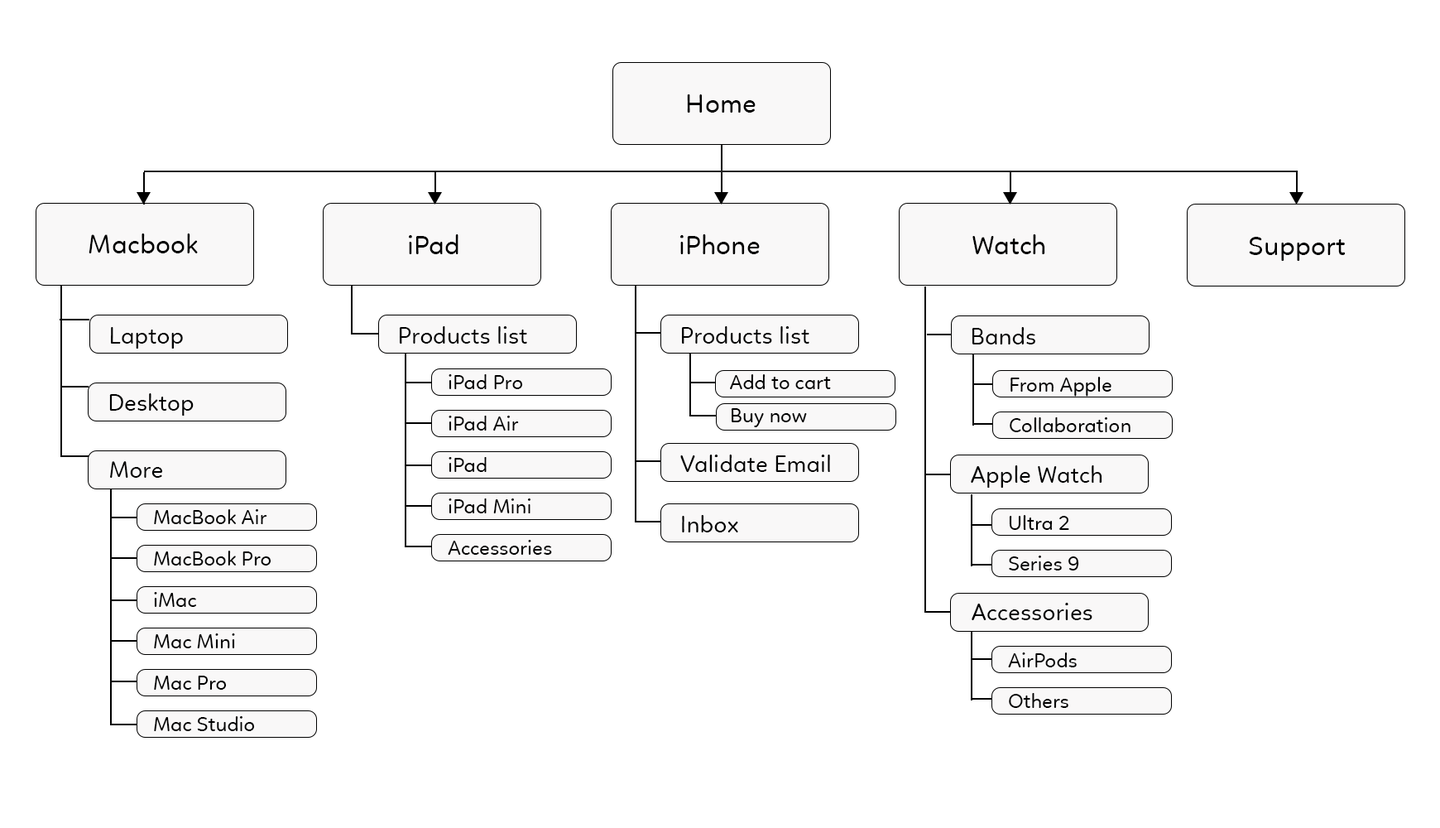
<style>
.page{position:relative;width:1440px;height:828px;background:#ffffff}
.page>*{position:absolute;margin:0}
.t1{font:27.6px "r0c0iLinotte-Regular";color:#000000}
.t2{font:24.1px "r0c0iLinotte-Regular";color:#000000}
.t3{font:20.7px "r0c0iLinotte-Regular";color:#000000}
</style>
<div class="page">
<p class="t1" style="left:687px;top:94px;width:69px;height:19px">Home</p>
<p class="t1" style="left:89px;top:233px;width:109px;height:20px">Macbook</p>
<p class="t1" style="left:409px;top:234px;width:50px;height:20px">iPad</p>
<p class="t1" style="left:680px;top:234px;width:80px;height:20px">iPhone</p>
<p class="t1" style="left:973px;top:234px;width:73px;height:20px">Watch</p>
<p class="t1" style="left:1249px;top:237px;width:97px;height:24px">Support</p>
<p class="t2" style="left:111px;top:327px;width:72px;height:22px">Laptop</p>
<p class="t2" style="left:400px;top:326px;width:127px;height:18px">Products list</p>
<p class="t2" style="left:682px;top:326px;width:128px;height:18px">Products list</p>
<p class="t2" style="left:972px;top:327px;width:64px;height:17px">Bands</p>
<p class="t3" style="left:449px;top:374px;width:74px;height:15px">iPad Pro</p>
<p class="t3" style="left:730px;top:374px;width:101px;height:15px">Add to cart</p>
<p class="t3" style="left:1011px;top:377px;width:101px;height:20px">From Apple</p>
<p class="t2" style="left:109px;top:393px;width:85px;height:23px">Desktop</p>
<p class="t3" style="left:731px;top:408px;width:76px;height:19px">Buy now</p>
<p class="t3" style="left:449px;top:416px;width:70px;height:14px">iPad Air</p>
<p class="t3" style="left:1010px;top:417px;width:121px;height:15px">Collaboration</p>
<p class="t2" style="left:110px;top:461px;width:52px;height:17px">More</p>
<p class="t3" style="left:449px;top:457px;width:38px;height:15px">iPad</p>
<p class="t2" style="left:680px;top:454px;width:150px;height:18px">Validate Email</p>
<p class="t2" style="left:971px;top:465px;width:132px;height:23px">Apple Watch</p>
<p class="t3" style="left:154px;top:509px;width:113px;height:15px">MacBook Air</p>
<p class="t3" style="left:449px;top:498px;width:82px;height:15px">iPad Mini</p>
<p class="t2" style="left:682px;top:515px;width:56px;height:17px">Inbox</p>
<p class="t3" style="left:1009px;top:515px;width:61px;height:15px">Ultra 2</p>
<p class="t3" style="left:448px;top:540px;width:104px;height:15px">Accessories</p>
<p class="t3" style="left:154px;top:551px;width:118px;height:14px">MacBook Pro</p>
<p class="t3" style="left:1009px;top:555px;width:70px;height:15px">Series 9</p>
<p class="t3" style="left:154px;top:592px;width:42px;height:15px">iMac</p>
<p class="t2" style="left:972px;top:603px;width:121px;height:17px">Accessories</p>
<p class="t3" style="left:154px;top:633px;width:81px;height:15px">Mac Mini</p>
<p class="t3" style="left:1008px;top:652px;width:69px;height:15px">AirPods</p>
<p class="t3" style="left:154px;top:676px;width:73px;height:14px">Mac Pro</p>
<p class="t3" style="left:1009px;top:693px;width:60px;height:15px">Others</p>
<p class="t3" style="left:154px;top:716px;width:101px;height:15px">Mac Studio</p>
</div>
